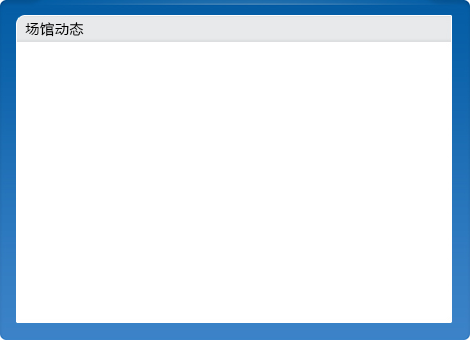
<style>
.page{position:relative;width:470px;height:340px;background:#ffffff}
.page>*{position:absolute;margin:0}
.t1{font:14px "MicrosoftYaHei";letter-spacing:0.05em;color:#000000}
</style>
<div class="page">
<p class="t1" style="left:25px;top:22px;width:59px;height:15px">场馆动态</p>
</div>
